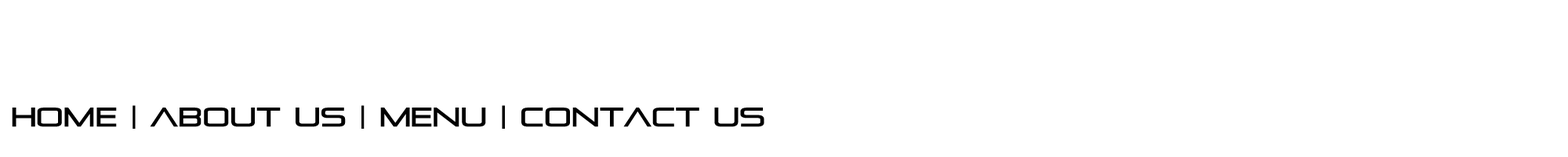
<style>
.page{position:relative;width:1568px;height:157px;background:#ffffff}
.page>*{position:absolute;margin:0}
.t1{font:26.7px "Pirulen";color:#000000}
</style>
<div class="page">
<p class="t1" style="left:12px;top:105px;width:752px;height:24px">Home | About Us | Menu | Contact Us</p>
</div>
